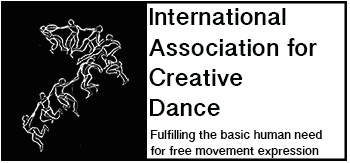
<style>
.page{position:relative;width:350px;height:163px;background:#ffffff}
.page>*{position:absolute;margin:0}
.t1{font:25.3px "GurmukhiSangamMN-Bold";letter-spacing:0.025em;color:#000304}
.t2{font:12.7px "GurmukhiSangamMN-Bold";letter-spacing:0.025em;color:#000304}
</style>
<div class="page">
<p class="t1" style="left:149px;top:8px;width:168px;height:108px">International<br>Association for <br>Creative <br>Dance</p>
<p class="t2" style="left:150px;top:130px;width:172px;height:28px">Fulfilling the basic human need <br>for free movement expression</p>
</div>
